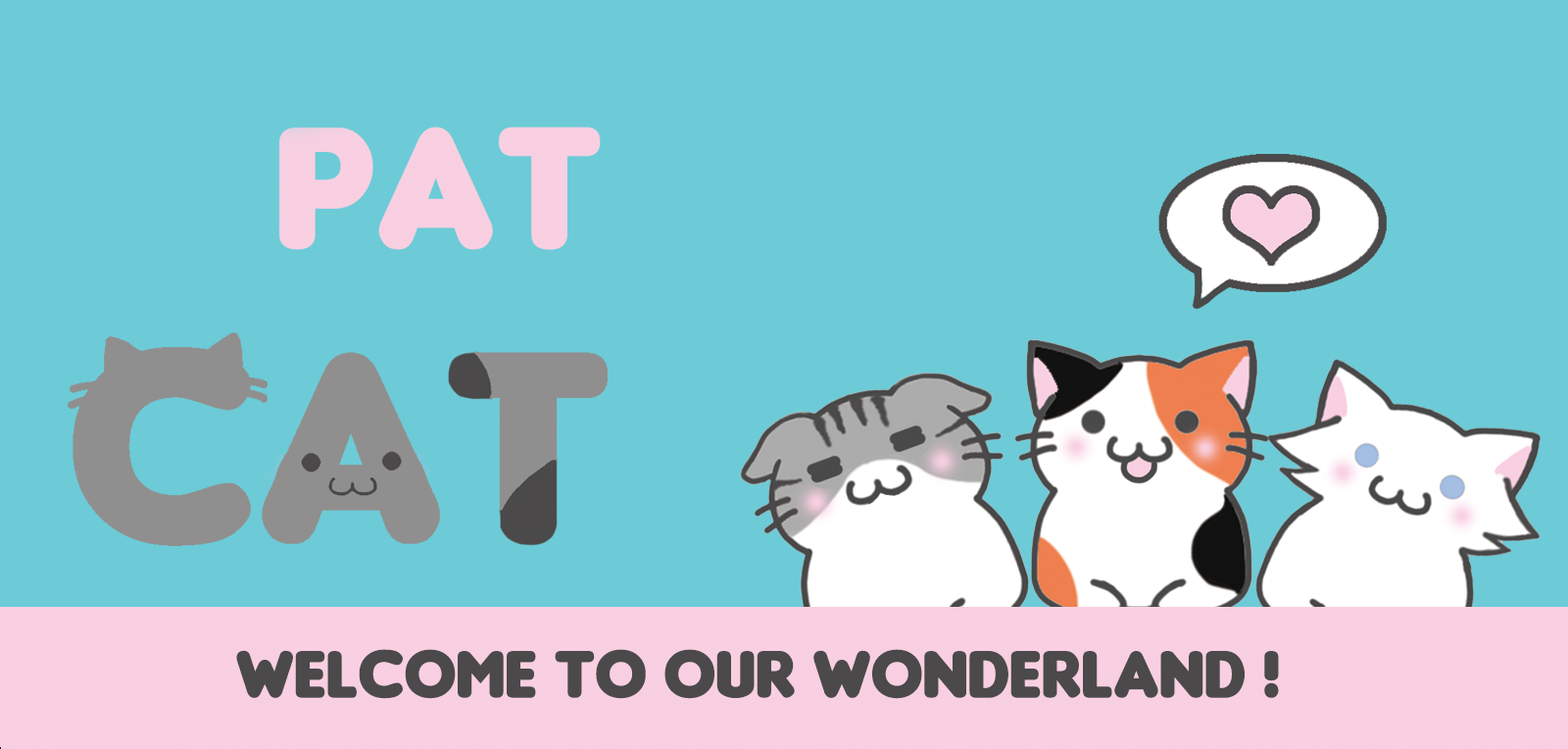
<style>
.page{position:relative;width:1568px;height:749px;background:#6ccbd7}
.page>*{position:absolute;margin:0}
.t1{font:70.6px "Insaniburger";color:#4b494a}
</style>
<div class="page">
<p class="t1" style="left:236px;top:649px;width:1043px;height:50px">Welcome to our wonderland !</p>
</div>
